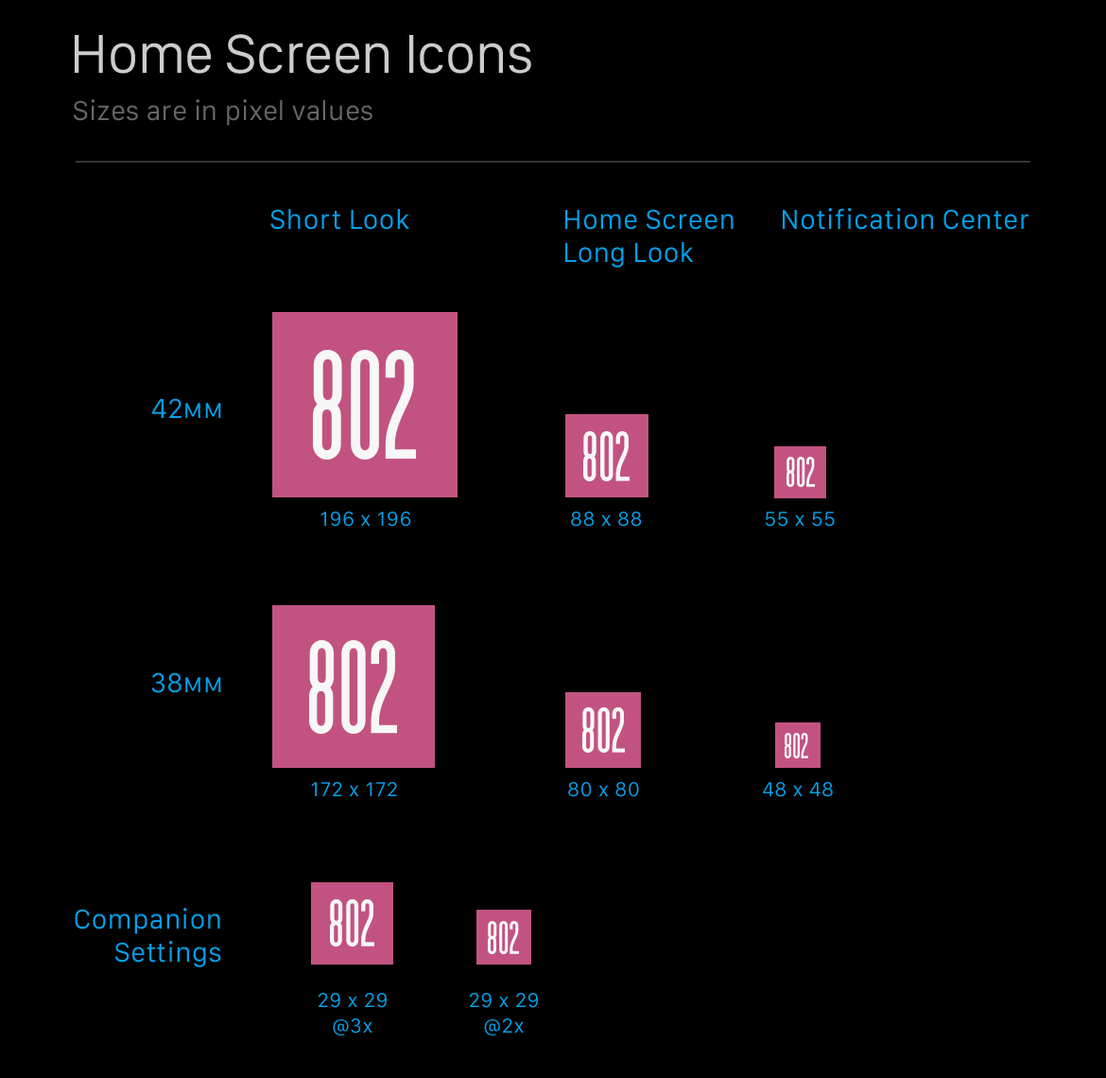
<style>
.page{position:relative;width:1106px;height:1078px;background:#000000}
.page>*{position:absolute;margin:0}
.t1{font:56.7px "SanFranciscoDisplay-Regular";letter-spacing:-0.005em;color:#cccccc}
.t2{font:28.4px "SanFranciscoText-Regular";letter-spacing:-0.005em;color:#666666}
.t3{font:28.4px "SanFranciscoText-Regular";letter-spacing:0.004em;color:#05a0e8}
.t4{font:28.4px/33.1px "SanFranciscoText-Regular";letter-spacing:0.004em;color:#05a0e8}
.t5{font:28.4px "SanFranciscoText-Regular";letter-spacing:0.004em;color:#05a0e8;font-variant:small-caps}
.t6{font:20.8px "SanFranciscoText-Regular";letter-spacing:0.024em;color:#05a0e8}
.t7{font:20.8px/25.5px "SanFranciscoText-Regular";letter-spacing:0.024em;color:#05a0e8}
</style>
<div class="page">
<p class="t1" style="left:75px;top:34px;width:456px;height:40px">Home Screen Icons</p>
<p class="t2" style="left:74px;top:99px;width:299px;height:27px">Sizes are in pixel values</p>
<p class="t3" style="left:270px;top:209px;width:139px;height:21px">Short Look</p>
<p class="t4" style="left:565px;top:209px;width:169px;height:59px">Home Screen<br>Long Look</p>
<p class="t3" style="left:783px;top:208px;width:246px;height:22px">Notification Center</p>
<p class="t3" style="left:152px;top:398px;width:69px;height:20px">42<span class="t5">mm</span></p>
<p class="t6" style="left:321px;top:512px;width:90px;height:15px">196 x 196</p>
<p class="t6" style="left:571px;top:512px;width:71px;height:15px">88 x 88</p>
<p class="t6" style="left:766px;top:512px;width:69px;height:15px">55 x 55</p>
<p class="t3" style="left:151px;top:672px;width:70px;height:21px">38<span class="t5">mm</span></p>
<p class="t6" style="left:311px;top:782px;width:86px;height:14px">172 x 172</p>
<p class="t6" style="left:568px;top:782px;width:71px;height:15px">80 x 80</p>
<p class="t6" style="left:763px;top:782px;width:70px;height:15px">48 x 48</p>
<p class="t4" style="left:75px;top:908px;width:146px;height:59px;text-align:right">Companion<br>Settings</p>
<p class="t7" style="left:319px;top:993px;width:68px;height:42px;text-align:center">29 x 29<br>@3x</p>
<p class="t7" style="left:470px;top:993px;width:68px;height:42px;text-align:center">29 x 29<br>@2x</p>
</div>
